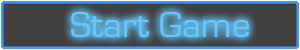
<style>
.page{position:relative;width:300px;height:50px;background:#404040}
.page>*{position:absolute;margin:0}
.t1{font:37.4px "EurostileRegular";color:#67c8ff}
</style>
<div class="page">
<p class="t1" style="left:71px;top:12px;width:178px;height:25px">Start Game</p>
</div>
